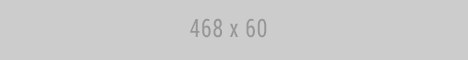
<style>
.page{position:relative;width:468px;height:60px;background:#cccccc}
.page>*{position:absolute;margin:0}
.t1{font:25px "Roboto-Condensed";letter-spacing:0.07em;color:#969696;scale:0.8 1}
</style>
<div class="page">
<p class="t1" style="left:190px;top:18px;width:77px;height:20px">468 x 60</p>
</div>
